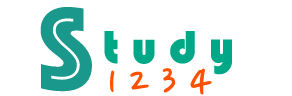
<style>
.page{position:relative;width:292px;height:96px;background:#ffffff}
.page>*{position:absolute;margin:0}
.t1{font:120px "Phosphate-Inline";color:#19988b}
.t2{font:48px "Bauhaus93";color:#00a888}
.t3{font:48px "NanumPen";color:#ff5200}
</style>
<div class="page">
<p class="t1" style="left:40px;top:7px;width:52px;height:85px">S</p>
<p class="t2" style="left:104px;top:31px;width:128px;height:44px">t u d y</p>
<p class="t3" style="left:110px;top:68px;width:102px;height:27px">1 2 3 4</p>
</div>
